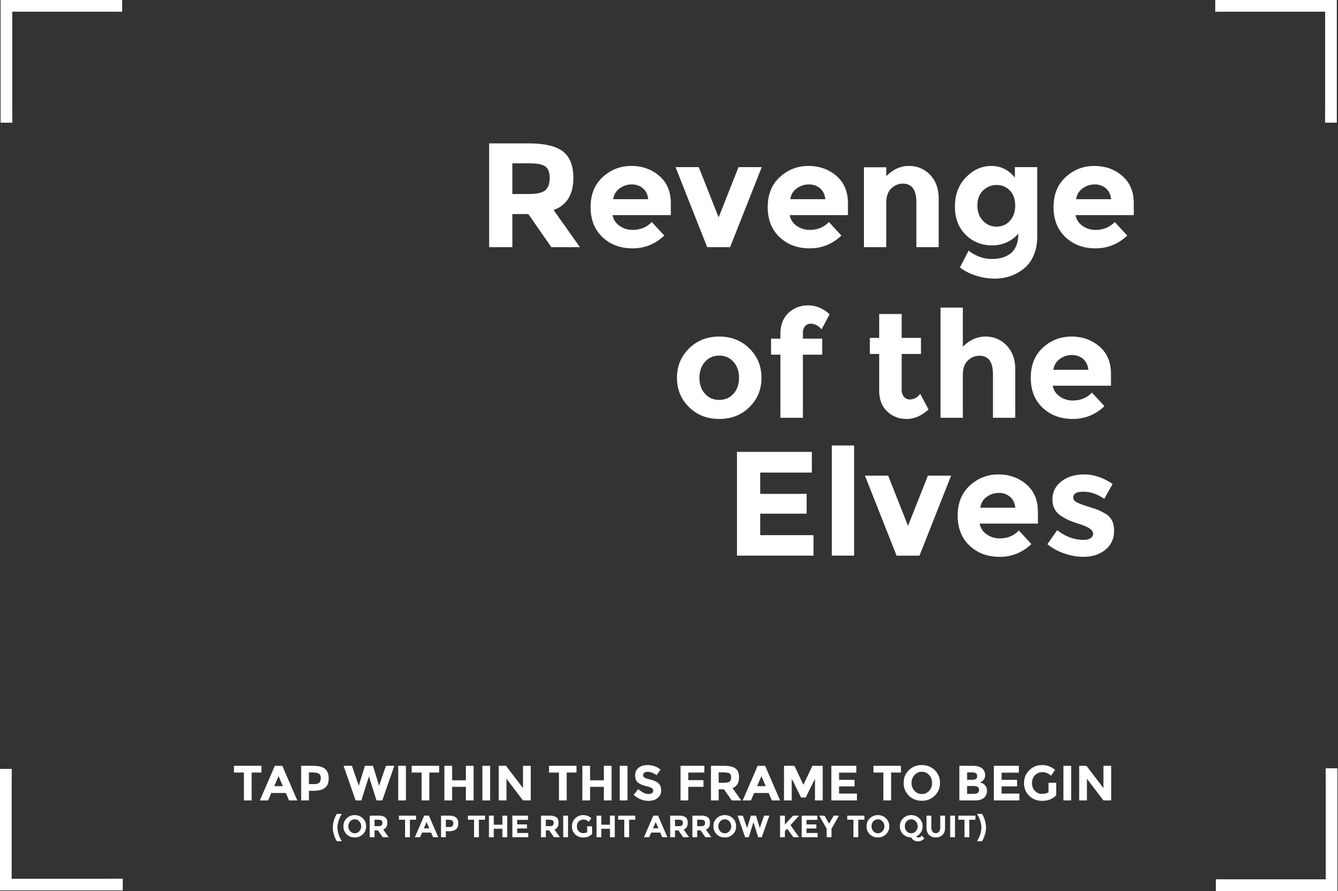
<style>
.page{position:relative;width:1338px;height:891px;background:#333333}
.page>*{position:absolute;margin:0}
.t1{font:148.5px "Montserrat-Bold";color:#ffffff}
.t2{font:49.5px "Montserrat-Bold";color:#ffffff}
.t3{font:30.9px "Montserrat-Bold";color:#ffffff}
</style>
<div class="page">
<p class="t1" style="left:489px;top:143px;width:645px;height:136px">Revenge</p>
<p class="t1" style="left:677px;top:305px;width:434px;height:115px">of the</p>
<p class="t1" style="left:736px;top:445px;width:378px;height:113px">Elves</p>
<p class="t2" style="left:234px;top:765px;width:877px;height:36px">TAP WITHIN THIS FRAME TO BEGIN</p>
<p class="t3" style="left:333px;top:814px;width:653px;height:28px">(OR TAP THE RIGHT ARROW KEY TO QUIT)</p>
</div>
